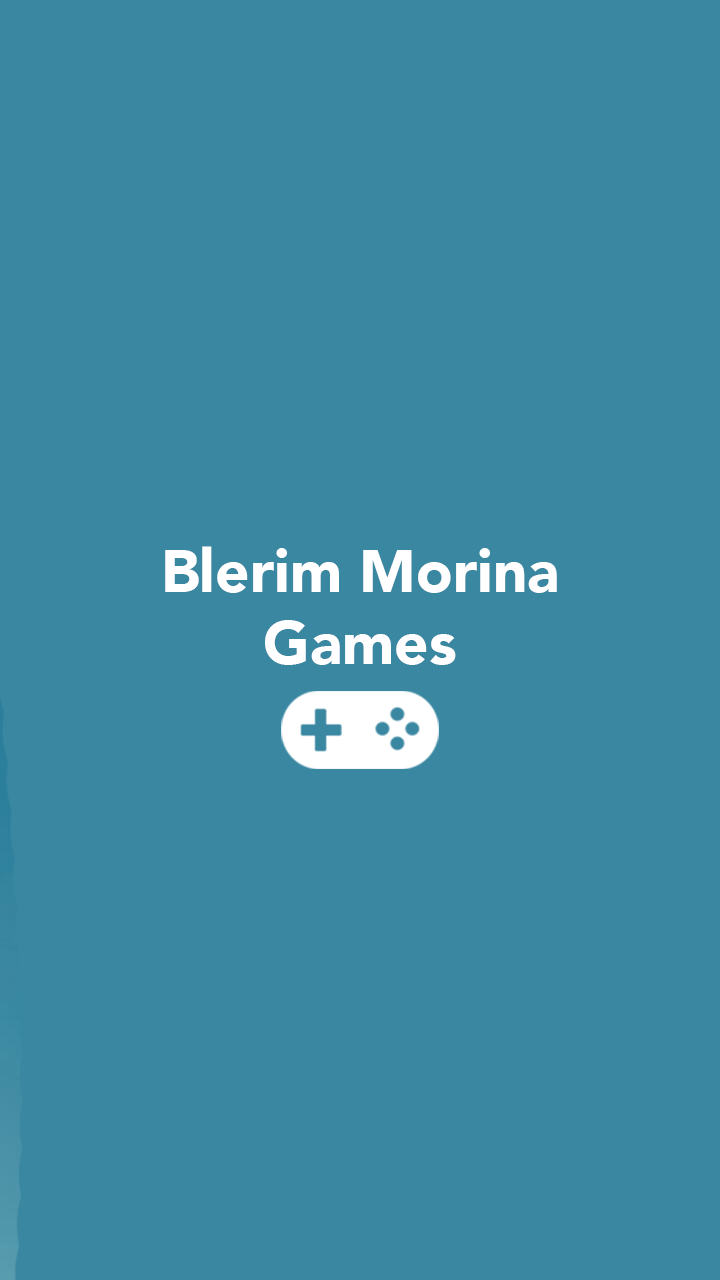
<style>
.page{position:relative;width:720px;height:1280px;background:#3a87a1}
.page>*{position:absolute;margin:0}
.t1{font:60px "Avenir-Black";color:#ffffff}
</style>
<div class="page">
<p class="t1" style="left:165px;top:546px;width:392px;height:119px;text-align:center">Blerim Morina<br>Games</p>
</div>
